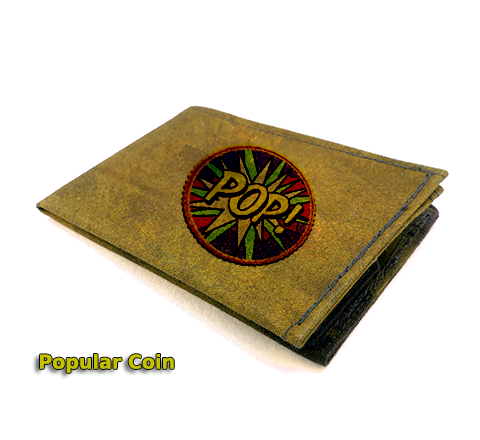
<style>
.page{position:relative;width:480px;height:440px;background:#ffffff}
.page>*{position:absolute;margin:0}
.t1{font:19.1px "DejaVuSans-Bold";color:#c4c100}
</style>
<div class="page">
<p class="t1" style="left:40px;top:354px;width:134px;height:19px">Popular Coin</p>
</div>
